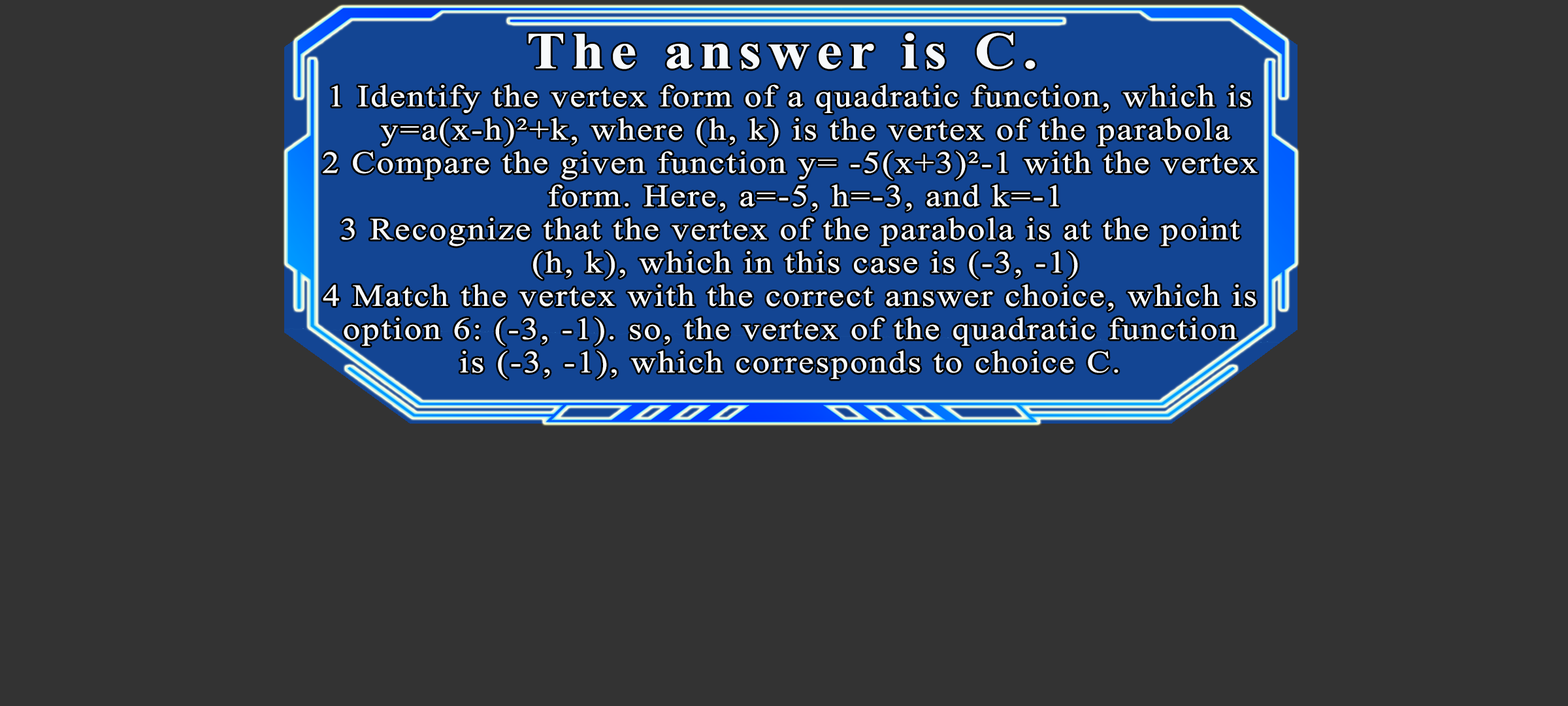
<style>
.page{position:relative;width:1568px;height:706px;background:#333333}
.page>*{position:absolute;margin:0}
.t1{font:51.7px "TimesNewRomanPS-BoldMT";letter-spacing:0.115em;color:#f7f9fb;scale:1.12 1}
.t2{font:30.9px/33.2px "TimesNewRomanPSMT";letter-spacing:0.055em;color:#f7f9fb;scale:1.12 1}
</style>
<div class="page">
<p class="t1" style="left:529px;top:33px;width:507px;height:36px">The answer is C.</p>
<p class="t2" style="left:323px;top:84px;width:935px;height:295px;text-align:center">1 Identify the vertex form of a quadratic function, which is<br>  y=a(x-h)²+k, where (h, k) is the vertex of the parabola<br>2 Compare the given function y= -5(x+3)²-1 with the vertex<br>  form. Here, a=-5, h=-3, and k=-1<br>3 Recognize that the vertex of the parabola is at the point<br>  (h, k), which in this case is (-3, -1)<br>4 Match the vertex with the correct answer choice, which is<br>option 6: (-3, -1). so, the vertex of the quadratic function<br>is (-3, -1), which corresponds to choice C.</p>
</div>
